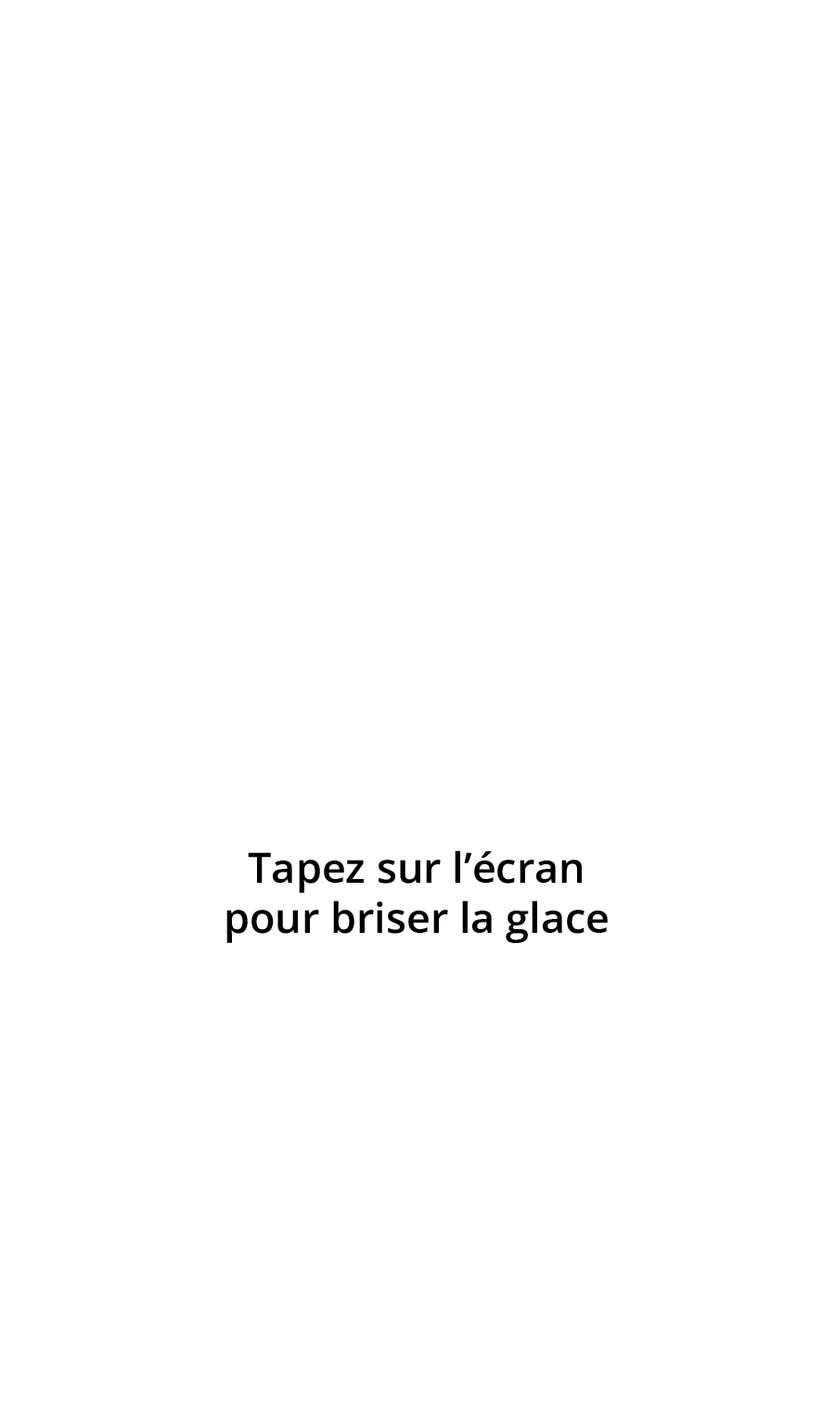
<style>
.page{position:relative;width:835px;height:1428px;background:#ffffff}
.page>*{position:absolute;margin:0}
.t1{font:41.7px "OpenSansRoman-SemiBold";color:#000000}
</style>
<div class="page">
<p class="t1" style="left:226px;top:851px;width:382px;height:92px;text-align:center">Tapez sur l’écran<br>pour briser la glace</p>
</div>
